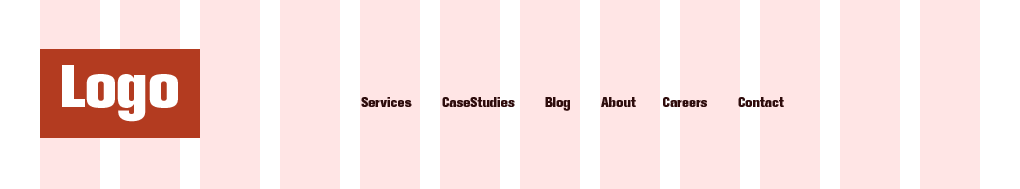
<style>
.page{position:relative;width:1020px;height:189px;background:#ffe5e5}
.page>*{position:absolute;margin:0}
.t1{font:14px "AkzidenzGroteskBE-XBd";color:#2e0c0c}
</style>
<div class="page">
<p class="t1" style="left:361px;top:97px;width:423px;height:14px">Services        CaseStudies        Blog        About       Careers        Contact</p>
</div>
